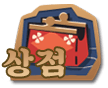
<style>
.page{position:relative;width:108px;height:88px;background:#ffffff}
.page>*{position:absolute;margin:0}
.t1{font:31.2px "SDKukdetopokki-bBd";letter-spacing:0.08em;color:#d7aa79;scale:1.07 1}
</style>
<div class="page">
<p class="t1" style="left:3px;top:48px;width:61px;height:29px">상점</p>
</div>
